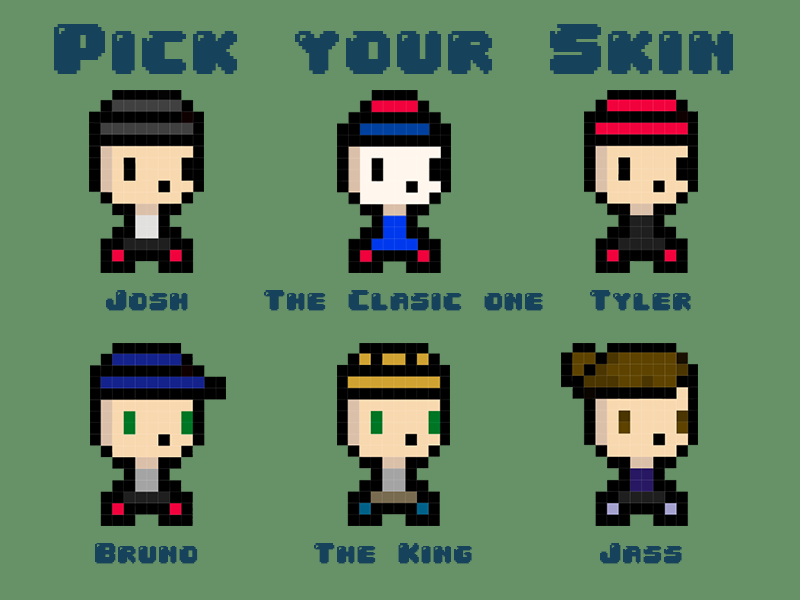
<style>
.page{position:relative;width:800px;height:600px;background:#679267}
.page>*{position:absolute;margin:0}
.t1{font:60px "04b30";color:#16425b;font-weight:bold}
.t2{font:24px "04b30";color:#16425b;font-weight:bold}
</style>
<div class="page">
<p class="t1" style="left:54px;top:24px;width:679px;height:50px">Pick your Skin</p>
<p class="t2" style="left:106px;top:290px;width:82px;height:21px">Josh</p>
<p class="t2" style="left:264px;top:290px;width:279px;height:21px">The Clasic one</p>
<p class="t2" style="left:590px;top:290px;width:101px;height:21px">Tyler</p>
<p class="t2" style="left:95px;top:543px;width:103px;height:21px">Bruno</p>
<p class="t2" style="left:314px;top:543px;width:158px;height:21px">The King</p>
<p class="t2" style="left:600px;top:543px;width:82px;height:21px">Jass</p>
</div>
